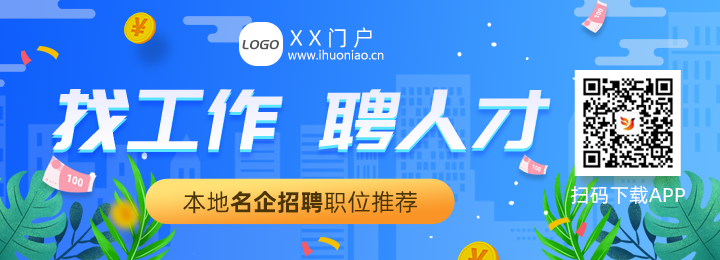
<style>
.page{position:relative;width:720px;height:260px}
.page>*{position:absolute;margin:0}
.t1{font:22px "AlibabaPuHuiTi-Regular";letter-spacing:0.24em;color:#ffffff}
.t2{font:14px "PangMenZhengDao";color:#555555;text-transform:uppercase;font-style:italic}
.t3{font:12px "MicrosoftYaHei";color:#ffffff}
.t4{font:83px "PangMenZhengDao";color:#ffffff;font-style:italic}
.t5{font:83px "PangMenZhengDao";color:#f2f3fe;font-style:italic}
.t6{font:20px "AlibabaPuHuiTiR";color:#ffffff}
.t7{font:24px "AlibabaPuHuiTiB";color:#4b3508}
.t8{font:24px "AlibabaPuHuiTiR";color:#4b3508}
</style>
<div class="page">
<p class="t1" style="left:290px;top:27px;width:82px;height:21px">XX门户</p>
<p class="t2" style="left:242px;top:40px;width:37px;height:10px">logo</p>
<p class="t3" style="left:288px;top:49px;width:96px;height:11px">www.ihuoniao.cn</p>
<p class="t4" style="left:51px;top:89px;width:500px;height:61px">找工作 聘人才</p>
<p class="t5" style="left:51px;top:92px;width:500px;height:61px">找工作 聘人才</p>
<p class="t6" style="left:570px;top:185px;width:115px;height:19px">扫码下载APP</p>
<p class="t7" style="left:183px;top:191px;width:234px;height:23px"><span class="t8">本地</span>名企招聘<span class="t8">职位推荐</span></p>
</div>
